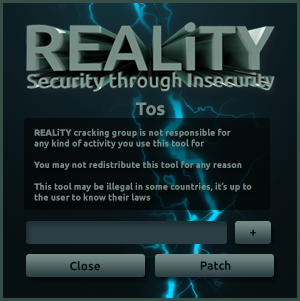
<style>
.page{position:relative;width:300px;height:301px}
.page>*{position:absolute;margin:0}
.t1{font:18px "Ubuntu-Bold";color:#768d86}
.t2{font:9px "Ubuntu-Bold";color:#768d86}
.t3{font:12px "Ubuntu-Bold";color:#000000}
</style>
<div class="page">
<p class="t1" style="left:136px;top:102px;width:29px;height:14px">Tos</p>
<p class="t2" style="left:34px;top:128px;width:218px;height:73px;text-align:right">REALiTY cracking group is not responsible for<br>any kind of activity you use this tool for<br><br>You may not redistribute this tool for any reason<br><br>This tool may be illegal in some countries, it’s up to<br>the user to know their laws</p>
<p class="t3" style="left:250px;top:229px;width:6px;height:7px">+</p>
<p class="t3" style="left:70px;top:261px;width:30px;height:10px">Close</p>
<p class="t3" style="left:200px;top:260px;width:31px;height:10px">Patch</p>
</div>
